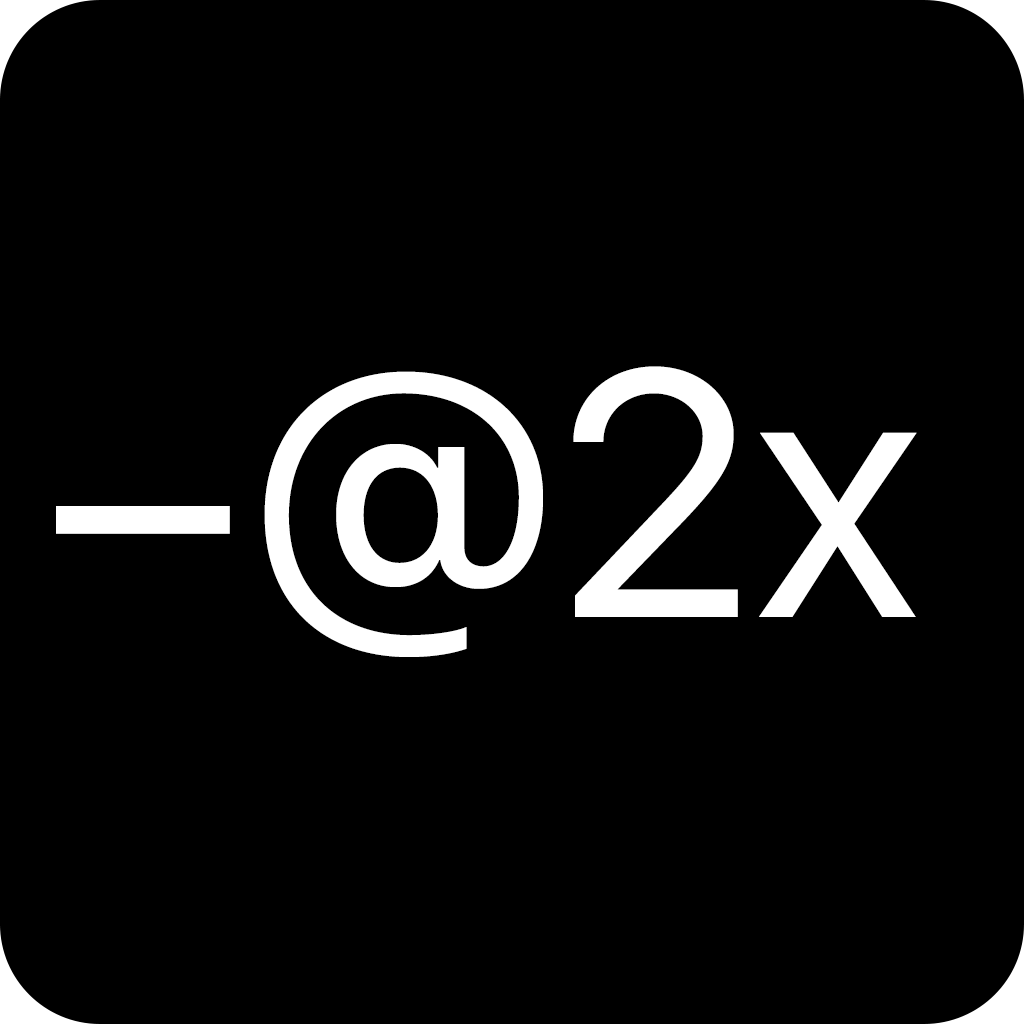
<style>
.page{position:relative;width:1024px;height:1024px;background:#000000}
.page>*{position:absolute;margin:0}
.t1{font:350px "SFUIDisplay-Regular";color:#ffffff}
</style>
<div class="page">
<p class="t1" style="left:56px;top:366px;width:861px;height:291px">−@2x</p>
</div>
